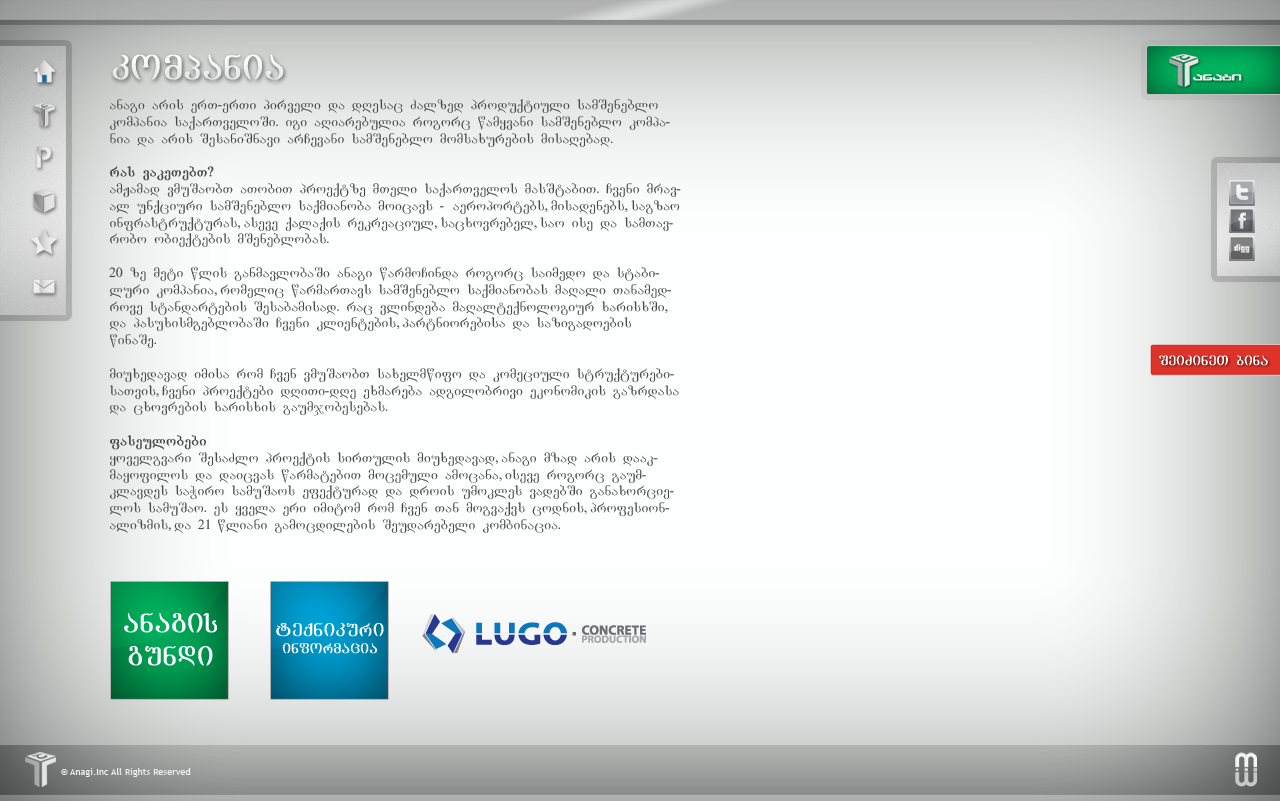
<style>
.page{position:relative;width:1280px;height:801px;background:#fcfffd}
.page>*{position:absolute;margin:0}
.t1{font:36px "AcadMtavr";color:#ffffff;font-weight:bold}
.t2{font:14px "AcadNusx";color:#4a4a4a}
.t3{font:14px "AcadNusx";color:#4a4a4a;font-weight:bold}
.t4{font:14px "AcadMtavr";color:#ffffff;font-weight:bold}
.t5{font:28px "AcadMtavr";color:#ffffff;font-weight:bold}
.t6{font:14.5px "AcadMtavr";color:#ffffff;font-weight:bold}
.t7{font:19.3px "AcadMtavr";color:#ffffff;font-weight:bold}
.t8{font:9.4px "TrebuchetMS";color:#eeeeee}
</style>
<div class="page">
<p class="t1" style="left:112px;top:54px;width:172px;height:26px">kompania</p>
<p class="t2" style="left:109px;top:99px;width:572px;height:435px">anagi aris erT-erTi pirveli da dResac Zalzed produqtiuli samSeneblo kompania saqarTveloSi. igi aRiarebulia rogorc wamyvani samSeneblo kompania da aris SesaniSnavi arCevani samSeneblo momsaxurebis misaRebad.<br><br><span class="t3">ras vakeTebT?<br></span>amJamad vmuSaobT aTobiT proeqtze mTeli saqarTvelos masStabiT. Cveni mravalFunqciuri samSeneblo saqmianoba moicavs - aeroportebs, misadenebs, sagzao infrastruqturas, aseve qalaqis rekreaciul, sacxovrebel, saoFise da samTavrobo obieqtebis mSeneblobas.<br><br>20 ze meti wlis ganmavlobaSi anagi warmoCinda rogorc saimedo da stabiluri kompania, romelic warmarTavs samSeneblo saqmianobas maRali Tanamedrove standartebis Sesabamisad. rac vlindeba maRalteqnologiur xarisxSi, da pasuxismgeblobaSi Cveni klientebis, partniorebisa da sazigadoebis winaSe. <br><br>miuxedavad imisa rom Cven vmuSaobT saxelmwifo da komeciuli struqturebisaTvis, Cveni proeqtebi dRiTi-dRe exmareba adgilobrivi ekonomikis gazrdasa da cxovrebis xarisxis gaumjobesebas.<br><br><span class="t3">faseulobebi<br></span>yovelgvari SesaZlo proeqtis sirTulis miuxedavad, anagi mzad aris daakmayofilos da daicvas warmatebiT mocemuli amocana, iseve rogorc gaumklavdes saWiro samuSaos efeqturad da drois umokles vadebSi ganaxorcielos samuSao. es yvelaFeri imitom rom Cven Tan mogvaqvs codnis, profesionalizmis, da 21 wliani gamocdilebis Seudarebeli kombinacia.</p>
<p class="t4" style="left:1159px;top:355px;width:109px;height:11px">SeiZineT bina</p>
<p class="t5" style="left:124px;top:613px;width:93px;height:53px;text-align:center">anagis<br>gundi</p>
<p class="t6" style="left:276px;top:623px;width:108px;height:31px;text-align:center"><span class="t7">teqnikuri<br></span>informacia</p>
<p class="t8" style="left:61px;top:768px;width:130px;height:9px">© Anagi.Inc All Rights Reserved</p>
</div>
